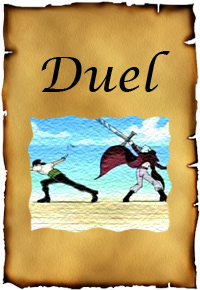
<style>
.page{position:relative;width:200px;height:290px}
.page>*{position:absolute;margin:0}
.t1{font:48px "LucidaCalligraphy-Italic";color:#000000;scale:0.97 1}
</style>
<div class="page">
<p class="t1" style="left:41px;top:51px;width:129px;height:41px">Duel</p>
</div>
